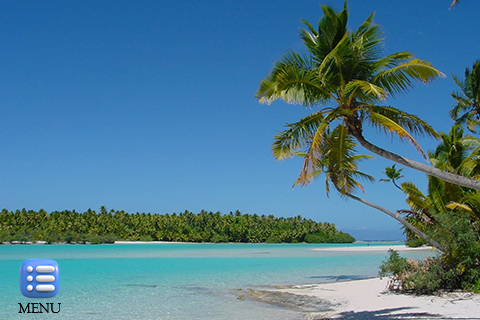
<style>
.page{position:relative;width:480px;height:320px}
.page>*{position:absolute;margin:0}
.t1{font:14.8px "GoudyOldStyleT-Regular";letter-spacing:-0.025em;color:#000000}
</style>
<div class="page">
<p class="t1" style="left:18px;top:303px;width:43px;height:10px">MENU</p>
</div>
